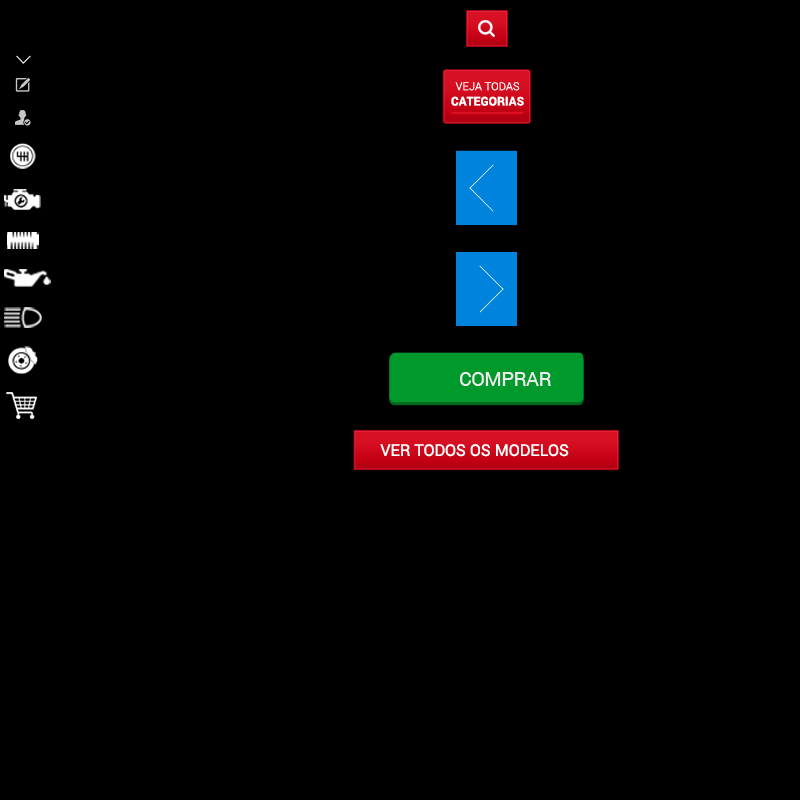
<style>
.page{position:relative;width:800px;height:800px;background:#000000}
.page>*{position:absolute;margin:0}
.t1{font:11px/15.3px "Roboto-Light";letter-spacing:0.01em;color:#ffffff;text-transform:uppercase}
.t2{font:12px/15.3px "Roboto-Bold";letter-spacing:0.01em;color:#ffffff;text-transform:uppercase}
.t3{font:20px "Roboto-Regular";letter-spacing:-0.03em;color:#ebebeb;text-transform:uppercase}
.t4{font:16px "Roboto-Regular";color:#ffffff;text-transform:uppercase}
</style>
<div class="page">
<p class="t1" style="left:451px;top:82px;width:73px;height:24px;text-align:center">VEJA TODAS<br><span class="t2">CATEGORIAS</span></p>
<p class="t3" style="left:460px;top:372px;width:91px;height:14px">COMPRAR</p>
<p class="t4" style="left:380px;top:444px;width:189px;height:13px">VER TODOS OS MODELOS</p>
</div>
